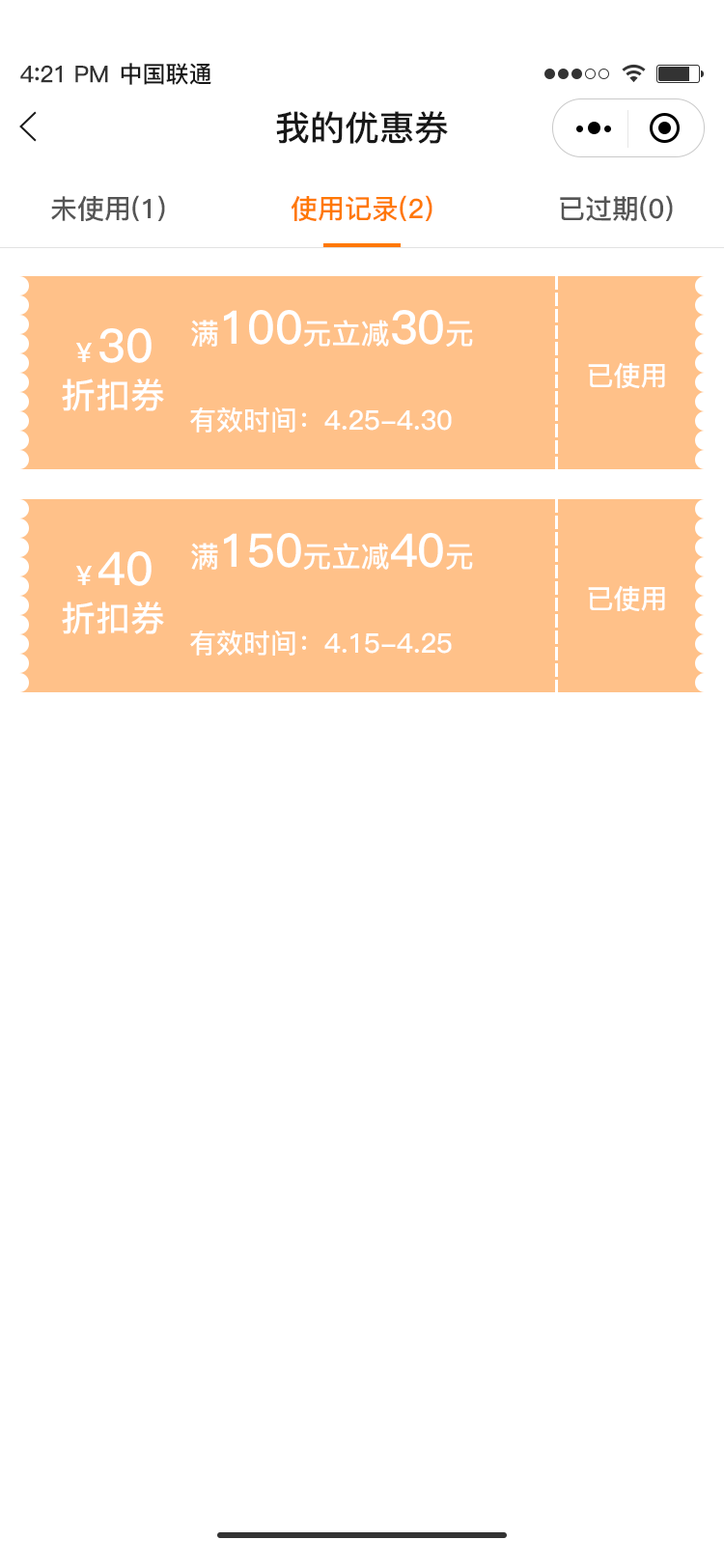
<style>
.page{position:relative;width:724px;height:1568px;background:#ffffff}
.page>*{position:absolute;margin:0}
.t1{font:23.2px "PingFang-SC-Bold";letter-spacing:-0.02em;color:#333333}
.t2{font:25.1px "PingFang-SC-Bold";letter-spacing:-0.02em;color:#333333}
.t3{font:23.2px "PingFang-SC-Bold";color:#181818}
.t4{font:34.8px "PingFang-SC-Bold";color:#181818}
.t5{font:27px "PingFang-SC-Bold";color:#555555}
.t6{font:27px "PingFang-SC-Bold";color:#ff7800}
.t7{font:46.3px "PingFang-SC-Bold";color:#ffffff}
.t8{font:29px "PingFang-SC-Bold";color:#ffffff}
.t9{font:27px "PingFang-SC-Bold";color:#ffffff}
.t10{font:34.8px "PingFang-SC-Bold";color:#ffffff}
</style>
<div class="page">
<p class="t1" style="left:20px;top:65px;width:88px;height:18px">4<span class="t2">:</span>21 PM</p>
<p class="t3" style="left:121px;top:63px;width:90px;height:22px">中国联通</p>
<p class="t4" style="left:276px;top:111px;width:172px;height:33px">我的优惠券</p>
<p class="t5" style="left:51px;top:195px;width:114px;height:26px">未使用(1)</p>
<p class="t6" style="left:291px;top:195px;width:142px;height:26px">使用记录(2)</p>
<p class="t5" style="left:560px;top:195px;width:113px;height:26px">已过期(0)</p>
<p class="t7" style="left:191px;top:310px;width:282px;height:37px"><span class="t8">满</span>100<span class="t8">元立减</span>30<span class="t8">元</span></p>
<p class="t7" style="left:76px;top:328px;width:76px;height:35px"><span class="t9">￥</span>30</p>
<p class="t9" style="left:588px;top:362px;width:77px;height:26px">已使用</p>
<p class="t10" style="left:62px;top:378px;width:102px;height:33px">折扣券</p>
<p class="t9" style="left:190px;top:406px;width:262px;height:27px">有效时间：4.25-4.30</p>
<p class="t7" style="left:191px;top:533px;width:282px;height:37px"><span class="t8">满</span>150<span class="t8">元立减</span>40<span class="t8">元</span></p>
<p class="t7" style="left:76px;top:551px;width:76px;height:35px"><span class="t9">￥</span>40</p>
<p class="t9" style="left:588px;top:585px;width:77px;height:26px">已使用</p>
<p class="t10" style="left:62px;top:602px;width:102px;height:32px">折扣券</p>
<p class="t9" style="left:190px;top:630px;width:262px;height:26px">有效时间：4.15-4.25</p>
</div>
